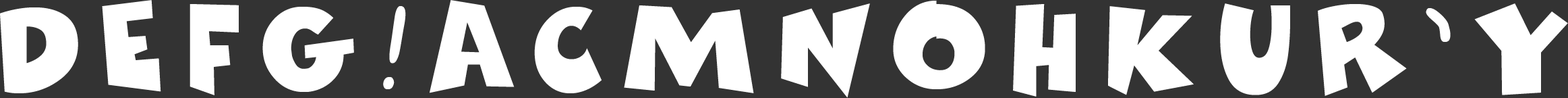
<style>
.page{position:relative;width:1568px;height:98px;background:#333333}
.page>*{position:absolute;margin:0}
.t1{font:101.2px "Comics-Regular";letter-spacing:0.2em;color:#ffffff}
</style>
<div class="page">
<p class="t1" style="left:0px;top:0px;width:1568px;height:98px">DEFG!ACMNOHKUR’Y</p>
</div>
